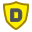
<style>
.page{position:relative;width:32px;height:32px;background:#ffffff}
.page>*{position:absolute;margin:0}
.t1{font:15.5px "EurostileLTStd-Demi";letter-spacing:0.15em;color:#4f4f4c;text-transform:uppercase}
</style>
<div class="page">
<p class="t1" style="left:11px;top:9px;width:11px;height:12px">D</p>
</div>
